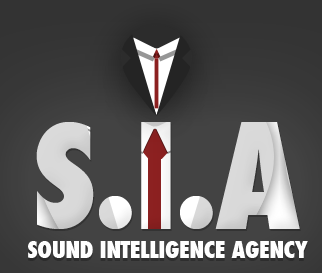
<style>
.page{position:relative;width:322px;height:273px}
.page>*{position:absolute;margin:0}
.t1{font:142px "Futura-CondensedExtraBold";letter-spacing:-0.02em}
.t2{font:23px "Futura-CondensedExtraBold";letter-spacing:-0.02em;color:#ffffff;text-transform:uppercase}
</style>
<div class="page">
<p class="t1" style="left:36px;top:122px;width:264px;height:107px">S.I.A</p>
<p class="t2" style="left:28px;top:241px;width:280px;height:17px">Sound intelligence agency</p>
</div>
